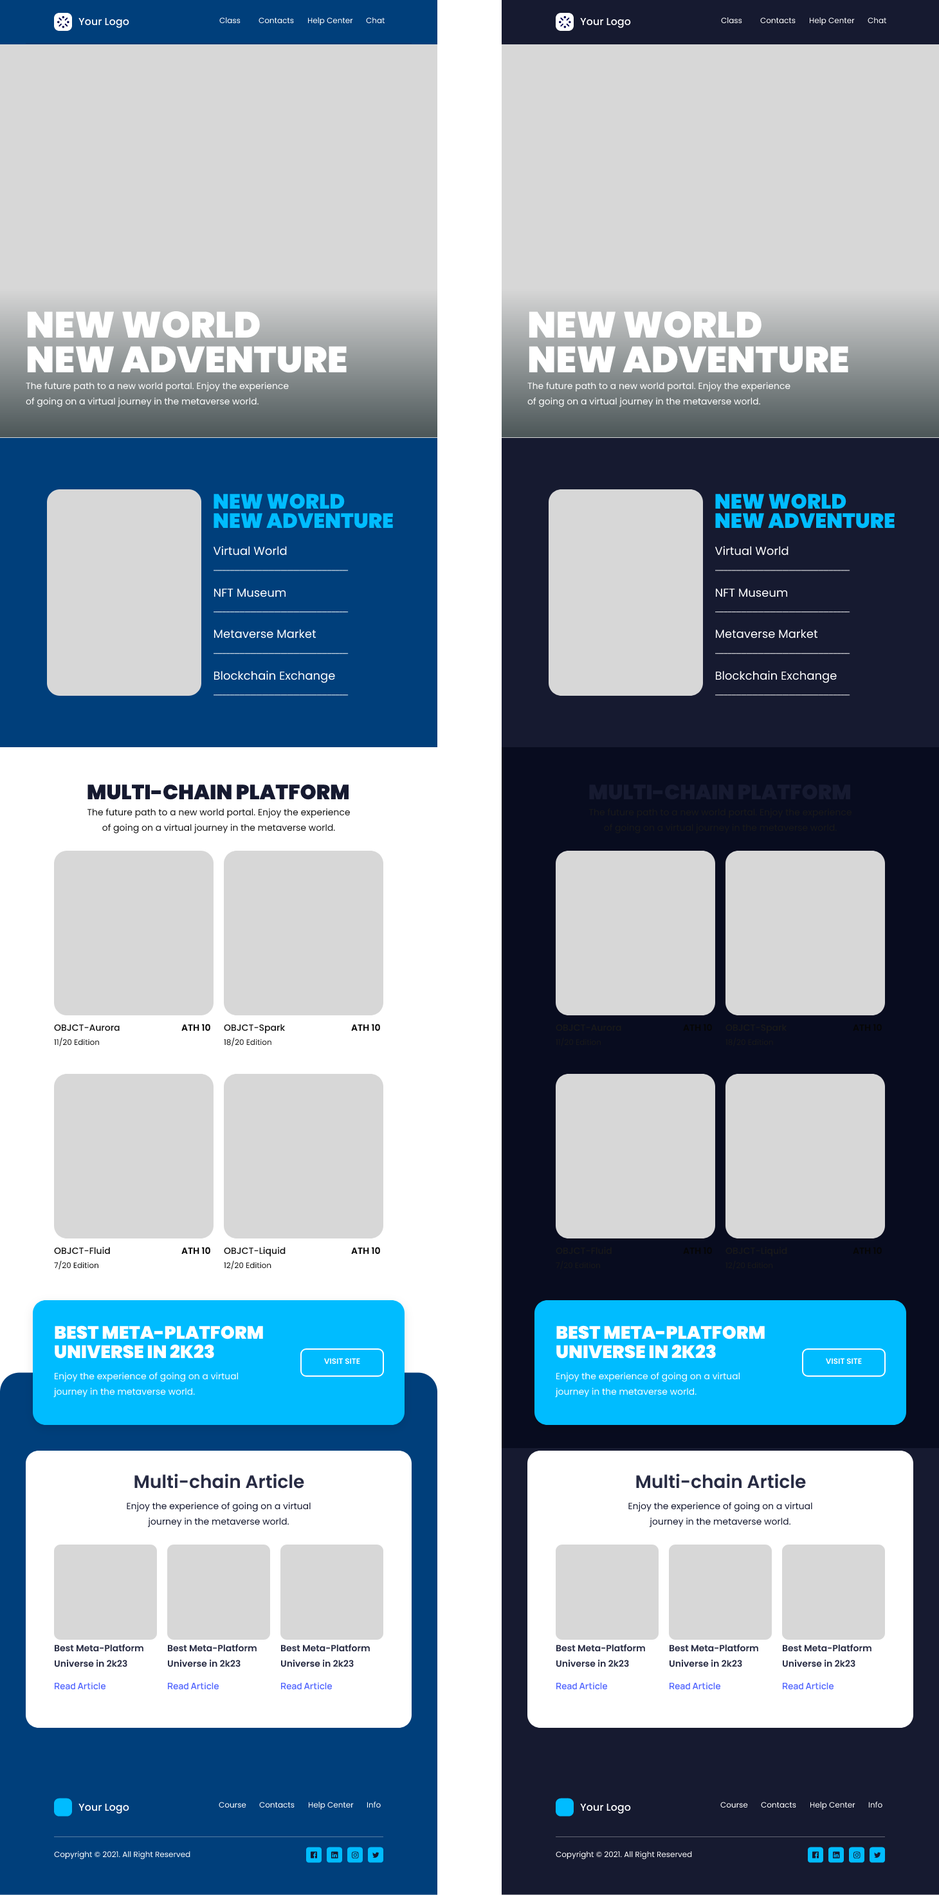
<style>
.page{position:relative;width:939px;height:1895px;background:#d7d7d7}
.page>*{position:absolute;margin:0}
.t1{font:10.3px "Poppins-Medium";color:#ffffff}
.t2{font:7.7px "Poppins-Regular";color:#ffffff}
.t3{font:36.6px/34.7px "Poppins-Black";color:#ffffff}
.t4{font:9px/15.4px "Poppins-Regular";color:#ffffff}
.t5{font:20.6px/19.3px "Poppins-Black";color:#00bcff}
.t6{font:11.6px "Poppins-Regular";color:#ffffff}
.t7{font:20.6px "Poppins-Black";color:#161a30;text-transform:uppercase}
.t8{font:9px/15.4px "Poppins-Regular";color:#191919}
.t9{font:9px "Poppins-Medium";color:#191919}
.t10{font:9px "Poppins-SemiBold";color:#060606}
.t11{font:7.7px "Poppins-Regular";color:#191919}
.t12{font:18px/19.3px "Poppins-Black";color:#ffffff;text-transform:uppercase}
.t13{font:7.7px "Poppins-SemiBold";color:#fdfdfd;text-transform:uppercase}
.t14{font:18px "Poppins-SemiBold";color:#272b43}
.t15{font:9px/15.4px "Poppins-Regular";color:#161a30}
.t16{font:9px/15.4px "Poppins-SemiBold";color:#272b43}
.t17{font:9px "Manrope-SemiBold";color:#5165fe}
</style>
<div class="page">
<p class="t1" style="left:78px;top:17px;width:51px;height:11px">Your Logo</p>
<p class="t2" style="left:219px;top:17px;width:21px;height:7px">Class</p>
<p class="t2" style="left:258px;top:17px;width:36px;height:7px">Contacts</p>
<p class="t2" style="left:307px;top:17px;width:46px;height:9px">Help Center</p>
<p class="t2" style="left:366px;top:17px;width:19px;height:7px">Chat</p>
<p class="t1" style="left:580px;top:17px;width:51px;height:11px">Your Logo</p>
<p class="t2" style="left:721px;top:17px;width:21px;height:7px">Class</p>
<p class="t2" style="left:760px;top:17px;width:35px;height:7px">Contacts</p>
<p class="t2" style="left:809px;top:17px;width:45px;height:9px">Help Center</p>
<p class="t2" style="left:867px;top:17px;width:20px;height:7px">Chat</p>
<p class="t3" style="left:27px;top:310px;width:319px;height:63px">NEW WORLD<br>NEW ADVENTURE</p>
<p class="t3" style="left:528px;top:310px;width:320px;height:63px">NEW WORLD<br>NEW ADVENTURE</p>
<p class="t4" style="left:26px;top:382px;width:263px;height:25px">The future path to a new world portal. Enjoy the experience of going on a virtual journey in the metaverse world.</p>
<p class="t4" style="left:527px;top:382px;width:263px;height:25px">The future path to a new world portal. Enjoy the experience of going on a virtual journey in the metaverse world.</p>
<p class="t5" style="left:213px;top:493px;width:180px;height:35px">NEW WORLD<br>NEW ADVENTURE</p>
<p class="t5" style="left:715px;top:493px;width:179px;height:35px">NEW WORLD<br>NEW ADVENTURE</p>
<p class="t6" style="left:213px;top:546px;width:74px;height:9px">Virtual World</p>
<p class="t6" style="left:714px;top:546px;width:74px;height:9px">Virtual World</p>
<p class="t6" style="left:213px;top:588px;width:73px;height:9px">NFT Museum</p>
<p class="t6" style="left:715px;top:588px;width:73px;height:9px">NFT Museum</p>
<p class="t6" style="left:213px;top:629px;width:103px;height:9px">Metaverse Market</p>
<p class="t6" style="left:715px;top:629px;width:102px;height:9px">Metaverse Market</p>
<p class="t6" style="left:213px;top:670px;width:122px;height:13px">Blockchain Exchange</p>
<p class="t6" style="left:715px;top:670px;width:121px;height:13px">Blockchain Exchange</p>
<p class="t7" style="left:87px;top:784px;width:262px;height:16px">MUlti-chain Platform</p>
<p class="t7" style="left:589px;top:784px;width:262px;height:16px">MUlti-chain Platform</p>
<p class="t8" style="left:87px;top:808px;width:263px;height:25px;text-align:center">The future path to a new world portal. Enjoy the experience of going on a virtual journey in the metaverse world.</p>
<p class="t8" style="left:588px;top:808px;width:263px;height:25px;text-align:center">The future path to a new world portal. Enjoy the experience of going on a virtual journey in the metaverse world.</p>
<p class="t9" style="left:54px;top:1024px;width:66px;height:7px">OBJCT-Aurora</p>
<p class="t10" style="left:181px;top:1023px;width:29px;height:7px">ATH 10</p>
<p class="t9" style="left:224px;top:1023px;width:61px;height:10px">OBJCT-Spark</p>
<p class="t10" style="left:351px;top:1023px;width:29px;height:7px">ATH 10</p>
<p class="t9" style="left:555px;top:1024px;width:66px;height:7px">OBJCT-Aurora</p>
<p class="t10" style="left:683px;top:1023px;width:29px;height:7px">ATH 10</p>
<p class="t9" style="left:725px;top:1023px;width:62px;height:10px">OBJCT-Spark</p>
<p class="t10" style="left:852px;top:1023px;width:29px;height:7px">ATH 10</p>
<p class="t11" style="left:54px;top:1037px;width:46px;height:10px">11/20 Edition</p>
<p class="t11" style="left:224px;top:1037px;width:47px;height:10px">18/20 Edition</p>
<p class="t11" style="left:555px;top:1037px;width:46px;height:10px">11/20 Edition</p>
<p class="t11" style="left:725px;top:1037px;width:48px;height:10px">18/20 Edition</p>
<p class="t9" style="left:54px;top:1246px;width:56px;height:8px">OBJCT-Fluid</p>
<p class="t10" style="left:181px;top:1246px;width:29px;height:8px">ATH 10</p>
<p class="t9" style="left:224px;top:1246px;width:61px;height:10px">OBJCT-Liquid</p>
<p class="t10" style="left:351px;top:1246px;width:29px;height:8px">ATH 10</p>
<p class="t9" style="left:555px;top:1246px;width:56px;height:8px">OBJCT-Fluid</p>
<p class="t10" style="left:683px;top:1246px;width:29px;height:8px">ATH 10</p>
<p class="t9" style="left:725px;top:1246px;width:62px;height:10px">OBJCT-Liquid</p>
<p class="t10" style="left:852px;top:1246px;width:29px;height:8px">ATH 10</p>
<p class="t11" style="left:54px;top:1260px;width:44px;height:10px">7/20 Edition</p>
<p class="t11" style="left:224px;top:1260px;width:47px;height:10px">12/20 Edition</p>
<p class="t11" style="left:555px;top:1260px;width:45px;height:10px">7/20 Edition</p>
<p class="t11" style="left:725px;top:1260px;width:48px;height:10px">12/20 Edition</p>
<p class="t12" style="left:55px;top:1325px;width:208px;height:33px">Best Meta-Platform Universe in 2k23</p>
<p class="t12" style="left:556px;top:1325px;width:208px;height:33px">Best Meta-Platform Universe in 2k23</p>
<p class="t13" style="left:324px;top:1358px;width:36px;height:6px">Visit SIte</p>
<p class="t13" style="left:825px;top:1358px;width:36px;height:6px">Visit SIte</p>
<p class="t4" style="left:53px;top:1372px;width:186px;height:25px">Enjoy the experience of going on a virtual journey in the metaverse world.</p>
<p class="t4" style="left:555px;top:1372px;width:185px;height:25px">Enjoy the experience of going on a virtual journey in the metaverse world.</p>
<p class="t14" style="left:134px;top:1473px;width:170px;height:15px">Multi-chain Article</p>
<p class="t14" style="left:636px;top:1473px;width:170px;height:15px">Multi-chain Article</p>
<p class="t15" style="left:127px;top:1502px;width:183px;height:25px;text-align:center">Enjoy the experience of going on a virtual journey in the metaverse world.</p>
<p class="t15" style="left:628px;top:1502px;width:184px;height:25px;text-align:center">Enjoy the experience of going on a virtual journey in the metaverse world.</p>
<p class="t16" style="left:54px;top:1644px;width:89px;height:23px">Best Meta-Platform Universe in 2k23</p>
<p class="t16" style="left:167px;top:1644px;width:89px;height:23px">Best Meta-Platform Universe in 2k23</p>
<p class="t16" style="left:280px;top:1644px;width:90px;height:23px">Best Meta-Platform Universe in 2k23</p>
<p class="t16" style="left:555px;top:1644px;width:90px;height:23px">Best Meta-Platform Universe in 2k23</p>
<p class="t16" style="left:669px;top:1644px;width:89px;height:23px">Best Meta-Platform Universe in 2k23</p>
<p class="t16" style="left:782px;top:1644px;width:89px;height:23px">Best Meta-Platform Universe in 2k23</p>
<p class="t17" style="left:54px;top:1682px;width:52px;height:7px">Read Article</p>
<p class="t17" style="left:167px;top:1682px;width:52px;height:7px">Read Article</p>
<p class="t17" style="left:280px;top:1682px;width:52px;height:7px">Read Article</p>
<p class="t17" style="left:555px;top:1682px;width:53px;height:7px">Read Article</p>
<p class="t17" style="left:669px;top:1682px;width:52px;height:7px">Read Article</p>
<p class="t17" style="left:782px;top:1682px;width:52px;height:7px">Read Article</p>
<p class="t1" style="left:78px;top:1803px;width:51px;height:11px">Your Logo</p>
<p class="t2" style="left:219px;top:1801px;width:27px;height:7px">Course</p>
<p class="t2" style="left:259px;top:1801px;width:35px;height:7px">Contacts</p>
<p class="t2" style="left:308px;top:1801px;width:46px;height:9px">Help Center</p>
<p class="t2" style="left:366px;top:1801px;width:15px;height:7px">Info</p>
<p class="t1" style="left:580px;top:1803px;width:51px;height:11px">Your Logo</p>
<p class="t2" style="left:720px;top:1801px;width:28px;height:7px">Course</p>
<p class="t2" style="left:760px;top:1801px;width:36px;height:7px">Contacts</p>
<p class="t2" style="left:809px;top:1801px;width:46px;height:9px">Help Center</p>
<p class="t2" style="left:868px;top:1801px;width:14px;height:7px">Info</p>
<p class="t2" style="left:54px;top:1850px;width:136px;height:9px">Copyright © 2021. All Right Reserved</p>
<p class="t2" style="left:555px;top:1850px;width:137px;height:9px">Copyright © 2021. All Right Reserved</p>
</div>
